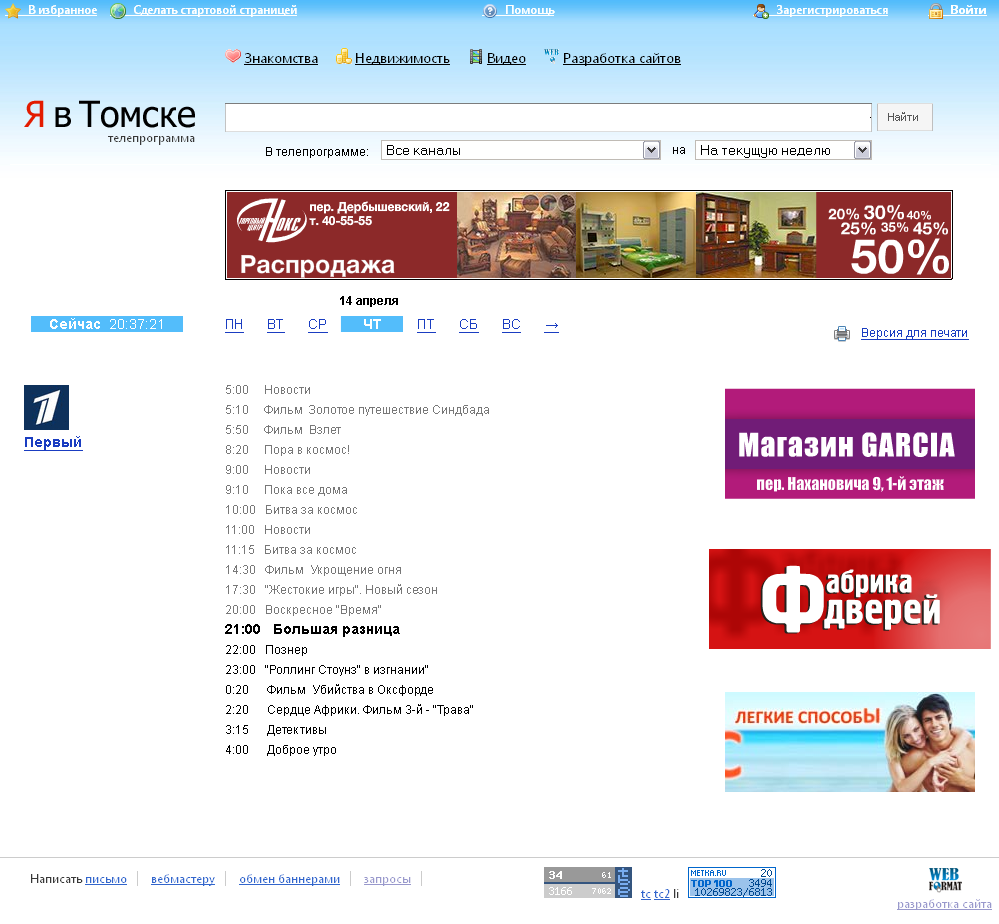
<style>
.page{position:relative;width:999px;height:924px;background:#ffffff}
.page>*{position:absolute;margin:0}
.t1{font:12px "ArialMT";color:#000000}
.t2{font:12px "Arial-BoldMT";color:#000000}
.t3{font:14px "ArialMT";color:#ffffff}
.t4{font:14px "Arial-BoldMT";color:#ffffff}
.t5{font:14px "ArialMT";color:#1a3dc1;text-decoration:underline}
.t6{font:12px "ArialMT";color:#1a3dc1;text-decoration:underline}
.t7{font:12px/20px "ArialMT";color:#787878}
.t8{font:14px/20px "Arial-BoldMT";color:#000000}
.t9{font:12px/20px "ArialMT";color:#000000}
.t10{font:14px "Arial-BoldMT";color:#1a3dc1;text-decoration:underline}
</style>
<div class="page">
<p class="t1" style="left:266px;top:147px;width:102px;height:11px">В телепрограмме:</p>
<p class="t1" style="left:673px;top:147px;width:12px;height:7px">на</p>
<p class="t2" style="left:340px;top:296px;width:58px;height:11px">14 апреля</p>
<p class="t3" style="left:50px;top:318px;width:112px;height:11px"><span class="t4">Сейчас</span>  20:37:21</p>
<p class="t5" style="left:225px;top:319px;width:334px;height:14px">ПН      ВТ      СР         <span class="t4">ЧТ         </span>ПТ      СБ      ВС      →</p>
<p class="t6" style="left:861px;top:328px;width:108px;height:12px">Версия для печати</p>
<p class="t7" style="left:225px;top:385px;width:264px;height:371px">5:00     Новости<br>5:10     Фильм  Золотое путешествие Синдбада <br>5:50     Фильм  Взлет <br>8:20     Пора в космос!<br>9:00     Новости<br>9:10     Пока все дома<br>10:00   Битва за космос <br>11:00   Новости<br>11:15   Битва за космос<br>14:30   Фильм  Укрощение огня <br>17:30   "Жестокие игры". Новый сезон <br>20:00   Воскресное "Время"<br><span class="t8">21:00   Большая разница <br></span><span class="t9">22:00   Познер<br>23:00   "Роллинг Стоунз" в изгнании"<br>0:20      Фильм  Убийства в Оксфорде <br>2:20      Сердце Африки. Фильм 3-й - "Трава"<br>3:15      Детективы<br>4:00      Доброе утро</span></p>
<p class="t10" style="left:24px;top:436px;width:59px;height:15px">Первый</p>
</div>
